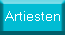
<style>
.page{position:relative;width:65px;height:35px;background:#00bcd4}
.page>*{position:absolute;margin:0}
.t1{font:14px "MicrosoftSansSerif";color:#ffffff}
</style>
<div class="page">
<p class="t1" style="left:5px;top:11px;width:55px;height:10px">Artiesten</p>
</div>
